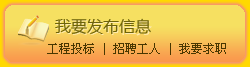
<style>
.page{position:relative;width:250px;height:67px;background:#f6e061}
.page>*{position:absolute;margin:0}
.t1{font:16px "MicrosoftYaHei";color:#6e640b}
.t2{font:16px "MicrosoftYaHei";color:#feeab0}
.t3{font:12px "SimSun";color:#493701}
</style>
<div class="page">
<p class="t1" style="left:55px;top:18px;width:96px;height:16px">我要发布信息</p>
<p class="t2" style="left:56px;top:19px;width:96px;height:17px">我要发布任务</p>
<p class="t3" style="left:47px;top:43px;width:179px;height:12px">工程投标 | 招聘工人 | 我要求职</p>
</div>
